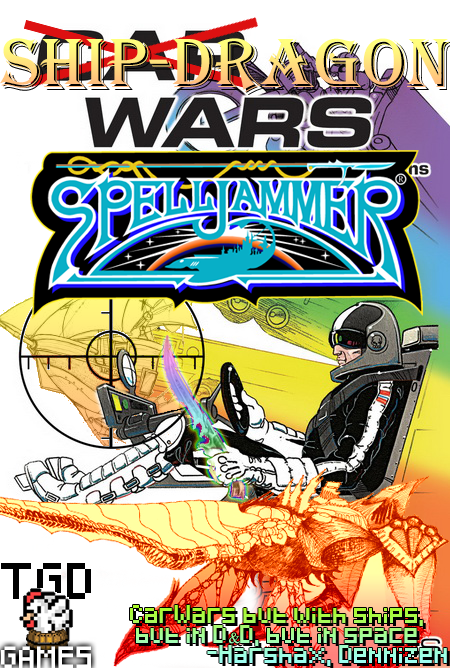
<style>
.page{position:relative;width:450px;height:668px}
.page>*{position:absolute;margin:0}
.t1{font:72px "Algerian"}
.t2{font:30px "Pixeled";color:#000000}
.t3{font:14.9px/20px "Pixeled"}
.t4{font:14.9px/20px "TimesNewRomanPSMT"}
.t5{font:18px "Pixeled";color:#ffffff}
</style>
<div class="page">
<p class="t1" style="left:0px;top:38px;width:450px;height:54px">SHIP-Dragon</p>
<p class="t2" style="left:1px;top:563px;width:90px;height:36px">TGD</p>
<p class="t3" style="left:130px;top:605px;width:317px;height:61px">CarWars but with ships,<br> but in D<span class="t4">&amp;</span>D, but in space<br>             -Harshax, Dennizen</p>
<p class="t5" style="left:1px;top:646px;width:90px;height:22px">GAMES</p>
</div>
